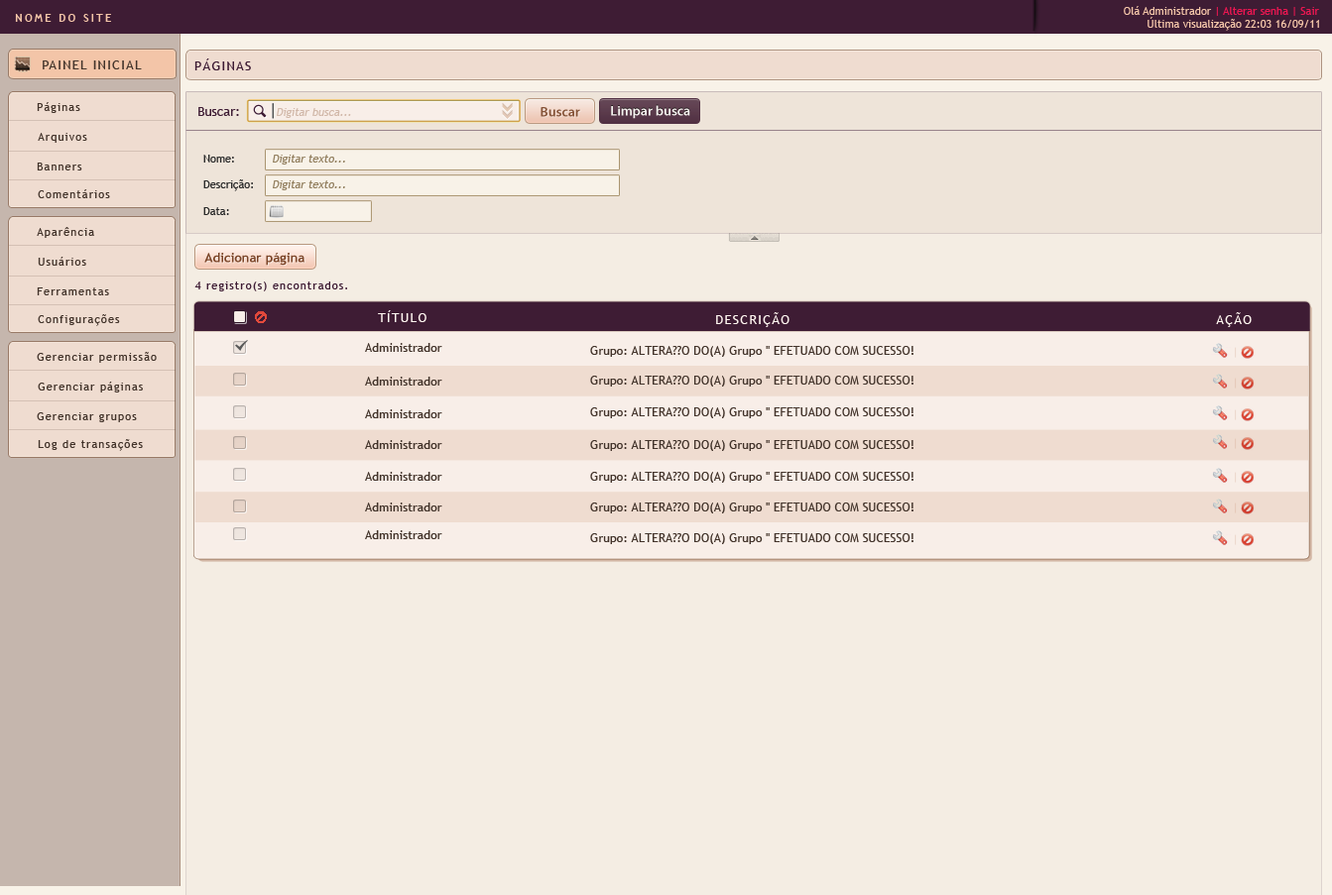
<style>
.page{position:relative;width:1332px;height:895px;background:#f4ede3}
.page>*{position:absolute;margin:0}
.t1{font:10.9px "TrebuchetMS";color:#ed1651}
.t2{font:10.9px "TrebuchetMS";color:#f3c5a8}
.t3{font:10.9px "TrebuchetMS-Bold";letter-spacing:0.2em;color:#f3c5a8;text-transform:uppercase}
.t4{font:12.9px "TrebuchetMS";letter-spacing:0.1em;color:#43342b;text-transform:uppercase}
.t5{font:12.9px "TrebuchetMS";letter-spacing:0.1em;color:#3e1c34;text-transform:uppercase}
.t6{font:10.9px "TrebuchetMS";letter-spacing:0.1em;color:#43342b}
.t7{font:12.9px "TrebuchetMS";color:#3e1c34}
.t8{font:10.9px "TrebuchetMS";color:#d2b9aa;font-style:italic}
.t9{font:13.9px "MyriadPro-Semibold";color:#7a4427}
.t10{font:13.9px "MyriadPro-Semibold";color:#ffffff}
.t11{font:10.9px "TrebuchetMS";color:#2b2b2b}
.t12{font:10.9px "TrebuchetMS";color:#938061;font-style:italic}
.t13{font:12.9px "TrebuchetMS-Bold";color:#7a4427}
.t14{font:10.9px "TrebuchetMS";letter-spacing:0.1em;color:#3e1c34}
.t15{font:12.9px "TrebuchetMS";letter-spacing:0.1em;color:#fff6f0;text-transform:uppercase}
.t16{font:12.2px "TrebuchetMS";color:#43342b}
</style>
<div class="page">
<p class="t1" style="left:1123px;top:6px;width:196px;height:10px"><span class="t2">Olá Administrador </span>| Alterar senha | Sair</p>
<p class="t3" style="left:15px;top:14px;width:96px;height:8px">Nome do site</p>
<p class="t2" style="left:1147px;top:17px;width:172px;height:14px">Última visualização 22:03 16/09/11</p>
<p class="t4" style="left:43px;top:60px;width:99px;height:9px">Painel Inicial</p>
<p class="t5" style="left:194px;top:59px;width:57px;height:11px">Páginas</p>
<p class="t6" style="left:37px;top:102px;width:43px;height:11px">Páginas</p>
<p class="t7" style="left:198px;top:107px;width:41px;height:9px">Buscar:</p>
<p class="t8" style="left:277px;top:108px;width:74px;height:10px">Digitar busca...</p>
<p class="t9" style="left:540px;top:107px;width:40px;height:10px">Buscar</p>
<p class="t10" style="left:611px;top:105px;width:79px;height:14px">Limpar busca</p>
<p class="t6" style="left:38px;top:133px;width:49px;height:10px">Arquivos</p>
<p class="t11" style="left:203px;top:155px;width:31px;height:8px">Nome:</p>
<p class="t12" style="left:273px;top:155px;width:72px;height:10px">Digitar texto...</p>
<p class="t6" style="left:37px;top:163px;width:45px;height:8px">Banners</p>
<p class="t11" style="left:203px;top:179px;width:50px;height:12px">Descrição:</p>
<p class="t12" style="left:273px;top:180px;width:72px;height:10px">Digitar texto...</p>
<p class="t6" style="left:38px;top:189px;width:72px;height:9px">Comentários</p>
<p class="t11" style="left:203px;top:207px;width:26px;height:8px">Data:</p>
<p class="t6" style="left:37px;top:227px;width:57px;height:11px">Aparência</p>
<p class="t6" style="left:38px;top:257px;width:48px;height:9px">Usuários</p>
<p class="t13" style="left:204px;top:252px;width:100px;height:14px">Adicionar página</p>
<p class="t14" style="left:194px;top:282px;width:153px;height:10px">4 registro(s) encontrados.</p>
<p class="t6" style="left:37px;top:288px;width:72px;height:7px">Ferramentas</p>
<p class="t6" style="left:38px;top:314px;width:82px;height:12px">Configurações</p>
<p class="t15" style="left:378px;top:310px;width:48px;height:12px">TÍTULO</p>
<p class="t15" style="left:716px;top:312px;width:73px;height:15px">descrição</p>
<p class="t15" style="left:1216px;top:312px;width:35px;height:15px">aÇÃO</p>
<p class="t6" style="left:37px;top:352px;width:120px;height:11px">Gerenciar permissão</p>
<p class="t16" style="left:365px;top:343px;width:77px;height:9px">Administrador</p>
<p class="t16" style="left:590px;top:346px;width:323px;height:11px">Grupo: ALTERA??O DO(A) Grupo '' EFETUADO COM SUCESSO!</p>
<p class="t16" style="left:365px;top:377px;width:77px;height:9px">Administrador</p>
<p class="t16" style="left:590px;top:376px;width:323px;height:11px">Grupo: ALTERA??O DO(A) Grupo '' EFETUADO COM SUCESSO!</p>
<p class="t6" style="left:38px;top:382px;width:105px;height:11px">Gerenciar páginas</p>
<p class="t6" style="left:37px;top:413px;width:100px;height:9px">Gerenciar grupos</p>
<p class="t16" style="left:365px;top:410px;width:77px;height:8px">Administrador</p>
<p class="t16" style="left:590px;top:408px;width:323px;height:10px">Grupo: ALTERA??O DO(A) Grupo '' EFETUADO COM SUCESSO!</p>
<p class="t6" style="left:38px;top:439px;width:105px;height:12px">Log de transações</p>
<p class="t16" style="left:365px;top:440px;width:77px;height:9px">Administrador</p>
<p class="t16" style="left:590px;top:440px;width:323px;height:11px">Grupo: ALTERA??O DO(A) Grupo '' EFETUADO COM SUCESSO!</p>
<p class="t16" style="left:365px;top:472px;width:77px;height:9px">Administrador</p>
<p class="t16" style="left:590px;top:472px;width:323px;height:11px">Grupo: ALTERA??O DO(A) Grupo '' EFETUADO COM SUCESSO!</p>
<p class="t16" style="left:365px;top:503px;width:77px;height:9px">Administrador</p>
<p class="t16" style="left:590px;top:503px;width:323px;height:11px">Grupo: ALTERA??O DO(A) Grupo '' EFETUADO COM SUCESSO!</p>
<p class="t16" style="left:365px;top:531px;width:77px;height:8px">Administrador</p>
<p class="t16" style="left:590px;top:533px;width:323px;height:11px">Grupo: ALTERA??O DO(A) Grupo '' EFETUADO COM SUCESSO!</p>
</div>
